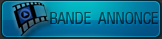
<style>
.page{position:relative;width:162px;height:39px}
.page>*{position:absolute;margin:0}
.t1{font:18px "Helvetica-Condensed-Thin";letter-spacing:-0.05em}
</style>
<div class="page">
<p class="t1" style="left:50px;top:12px;width:108px;height:12px">BANDE ANNONCE</p>
</div>
